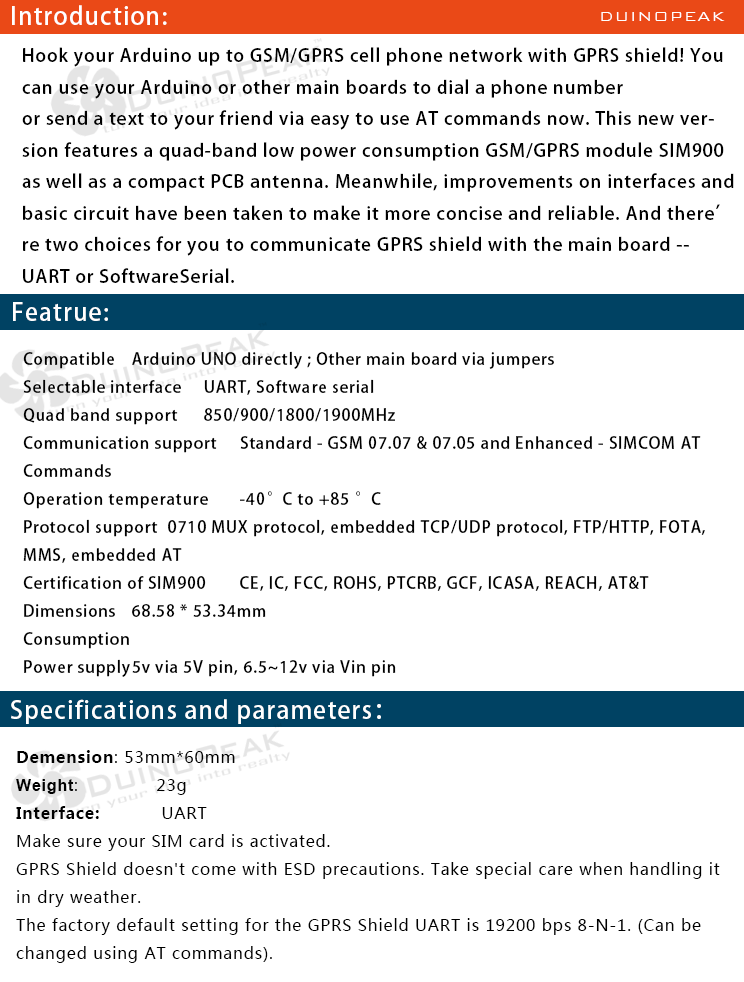
<style>
.page{position:relative;width:744px;height:982px;background:#ffffff}
.page>*{position:absolute;margin:0}
.t1{font:24px "AdobeHeitiStd-Regular";letter-spacing:0.05em;color:#ffffff}
.t2{font:18px "BankGothicBT-Light";letter-spacing:0.05em;color:#ffffff}
.t3{font:18px "AdobeHeitiStd-Regular";letter-spacing:0.05em;color:#000000}
.t4{font:16px "AdobeHeitiStd-Regular";letter-spacing:0.05em;color:#000000}
.t5{font:16px "MicrosoftYaHei";letter-spacing:0.05em;color:#000000}
.t6{font:16px "MicrosoftYaHei-Bold";letter-spacing:0.05em;color:#000000}
.t7{font:16px "Arial-BoldMT";letter-spacing:0.05em;color:#000000}
</style>
<div class="page">
<p class="t1" style="left:12px;top:5px;width:155px;height:20px">Introduction:</p>
<p class="t2" style="left:601px;top:12px;width:124px;height:9px">DUINOPEAK</p>
<p class="t3" style="left:22px;top:47px;width:712px;height:236px">Hook your Arduino up to GSM/GPRS cell phone network with GPRS shield! You <br>can use your Arduino or other main boards to dial a phone number <br>or send a text to your friend via easy to use AT commands now. This new ver-<br>sion features a quad-band low power consumption GSM/GPRS module SIM900 <br>as well as a compact PCB antenna. Meanwhile, improvements on interfaces and <br>basic circuit have been taken to make it more concise and reliable. And there’<br>re two choices for you to communicate GPRS shield with the main board -- <br>UART or SoftwareSerial.</p>
<p class="t1" style="left:13px;top:302px;width:95px;height:19px">Featrue:</p>
<p class="t4" style="left:23px;top:351px;width:682px;height:326px">Compatible Arduino UNO directly ; Other main board via jumpers<br>Selectable interface UART, Software serial<br>Quad band support 850/900/1800/1900MHz<br>Communication support Standard - GSM 07.07 &amp; 07.05 and Enhanced - SIMCOM AT <br>Commands<br>Operation temperature -40°C to +85 °C<br>Protocol support 0710 MUX protocol, embedded TCP/UDP protocol, FTP/HTTP, FOTA, <br>MMS, embedded AT<br>Certification of SIM900 CE, IC, FCC, ROHS, PTCRB, GCF, ICASA, REACH, AT&amp;T<br>Dimensions 68.58 * 53.34mm<br>Consumption <br>Power supply 5v via 5V pin, 6.5~12v via Vin pin</p>
<p class="t1" style="left:11px;top:699px;width:370px;height:25px">Specifications and parameters：</p>
<p class="t5" style="left:16px;top:750px;width:704px;height:213px"><span class="t6">Demension</span>: 53mm*60mm<br><span class="t7">Weight</span>:              23g<br><span class="t6">Interface:           </span>UART<br>Make sure your SIM card is activated.<br>GPRS Shield doesn't come with ESD precautions. Take special care when handling it <br>in dry weather.<br>The factory default setting for the GPRS Shield UART is 19200 bps 8-N-1. (Can be <br>changed using AT commands).</p>
</div>
